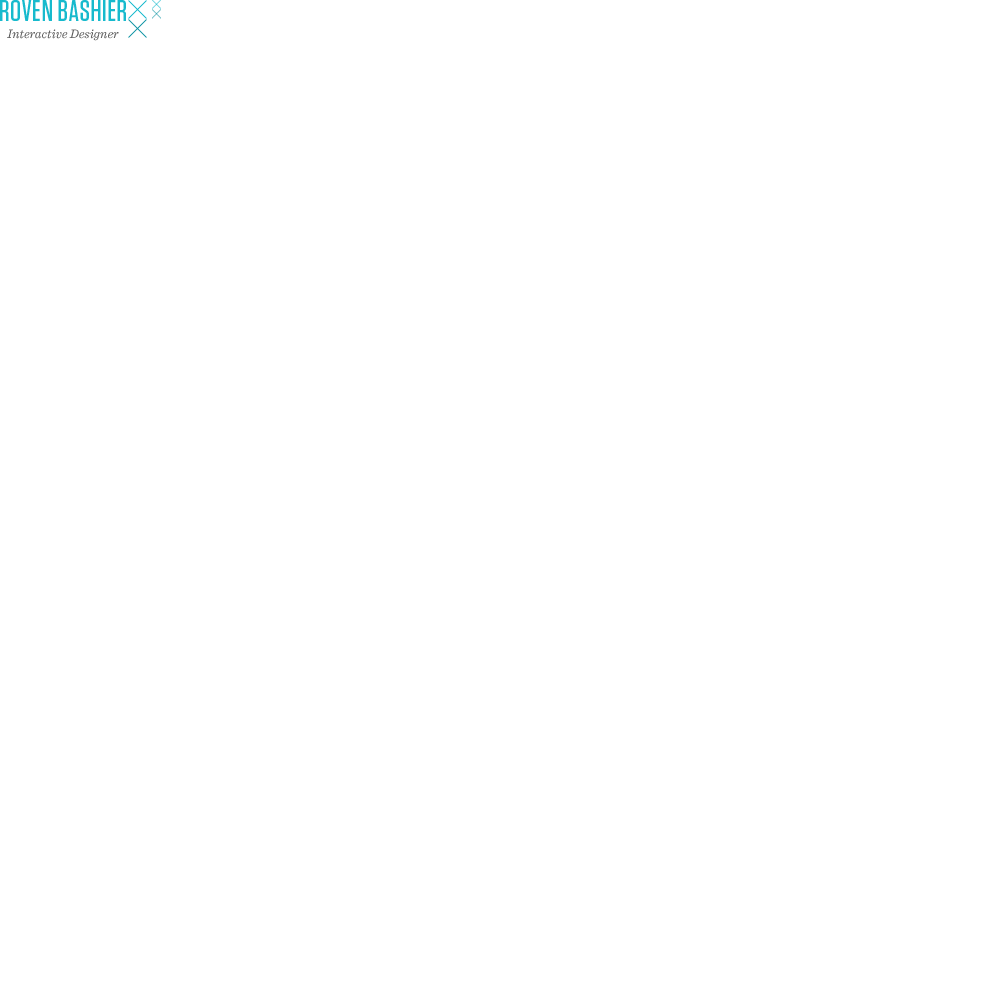
<style>
.page{position:relative;width:1000px;height:1000px;background:#ffffff}
.page>*{position:absolute;margin:0}
.t1{font:30px "Tungsten-Medium";letter-spacing:0.02em;color:#0bb6ca;text-transform:uppercase}
.t2{font:13px "Sentinel-BookItalic";color:#595959}
</style>
<div class="page">
<p class="t1" style="left:0px;top:0px;width:126px;height:21px;opacity:0.95">Roven Bashier</p>
<p class="t2" style="left:7px;top:29px;width:112px;height:12px">Interactive Designer</p>
</div>
